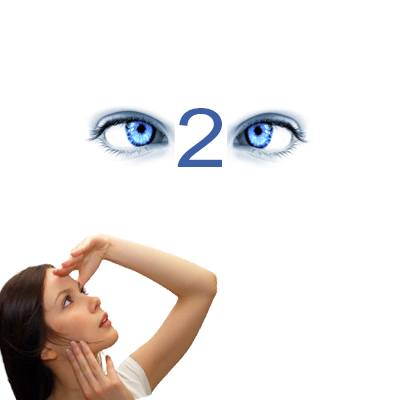
<style>
.page{position:relative;width:400px;height:400px;background:#ffffff}
.page>*{position:absolute;margin:0}
.t1{font:82px "ArialMT";color:#3d60a5;scale:1.14 1}
</style>
<div class="page">
<p class="t1" style="left:177px;top:108px;width:45px;height:59px">2</p>
</div>
